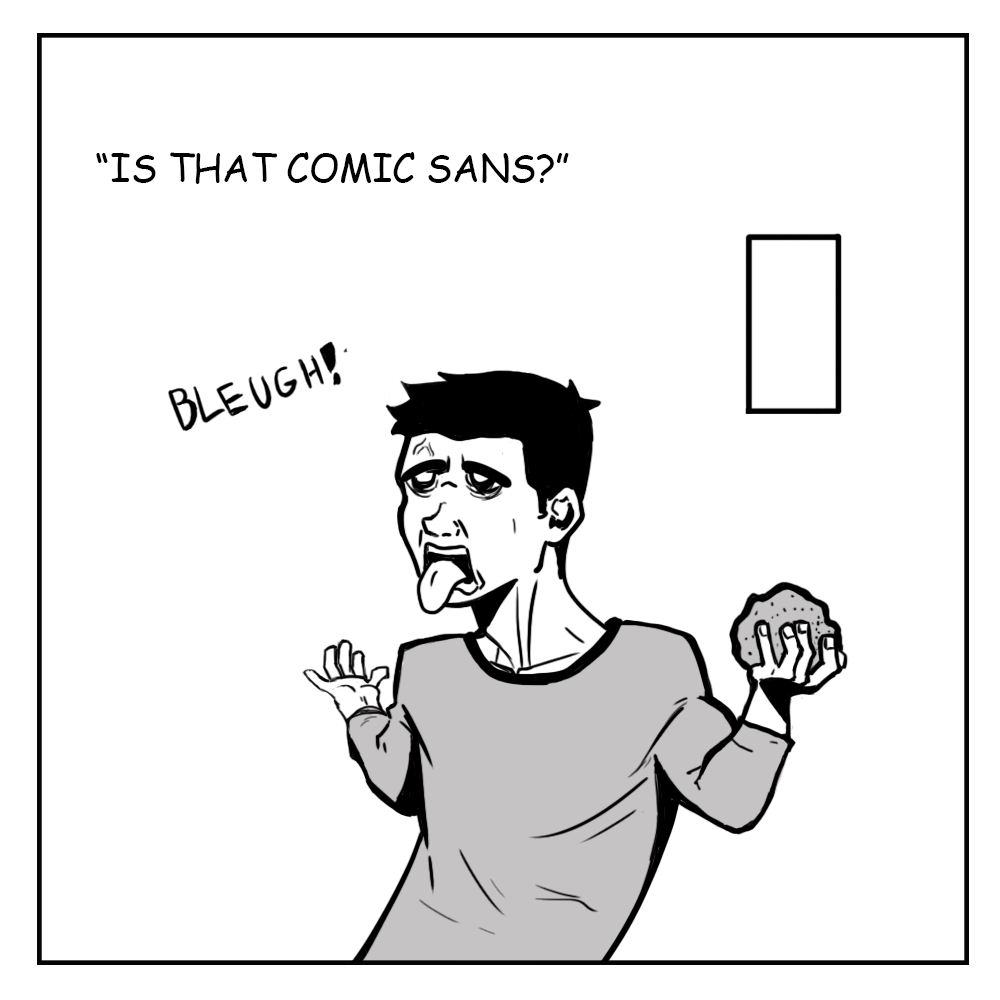
<style>
.page{position:relative;width:1000px;height:1000px;background:#ffffff}
.page>*{position:absolute;margin:0}
.t1{font:37.5px "ComicSansMS";color:#000000;text-transform:uppercase}
</style>
<div class="page">
<p class="t1" style="left:96px;top:152px;width:473px;height:32px">“Is that comic sans?”</p>
</div>
